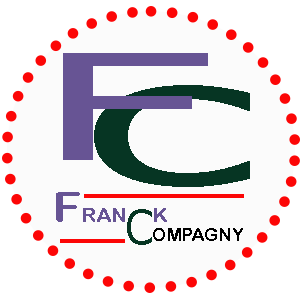
<style>
.page{position:relative;width:300px;height:300px;background:#fbfbfb}
.page>*{position:absolute;margin:0}
.t1{font:147.4px "Verdana";color:#675494;scale:2.12 1}
.t2{font:178.1px "Verdana";color:#063523;scale:1.99 1}
.t3{font:19.2px "ArialRoundedMTBold";color:#675494;scale:1.1 1}
.t4{font:42.3px "ArialRoundedMTBold";color:#675494;scale:1.1 1}
.t5{font:47px "Verdana";color:#063523;scale:0.9 1}
.t6{font:18.2px "ArialRoundedMTBold";color:#000000}
</style>
<div class="page">
<p class="t1" style="left:63px;top:53px;width:145px;height:107px">F</p>
<p class="t2" style="left:94px;top:85px;width:156px;height:102px">c</p>
<p class="t3" style="left:56px;top:192px;width:111px;height:30px"><span class="t4">F</span>RAN     K</p>
<p class="t5" style="left:127px;top:209px;width:25px;height:36px">C</p>
<p class="t6" style="left:153px;top:228px;width:90px;height:13px">OMPAGNY</p>
</div>
